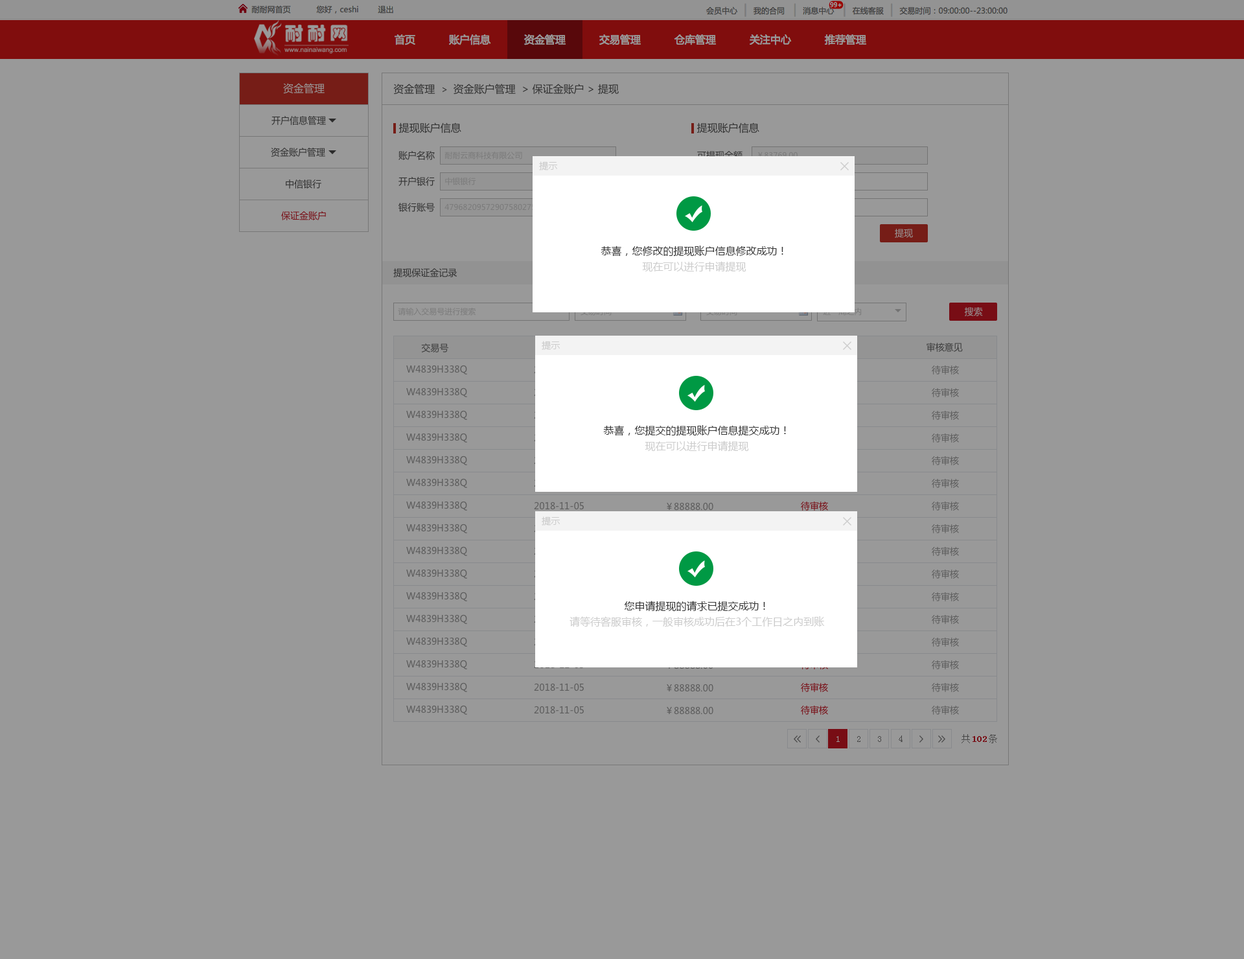
<style>
.page{position:relative;width:1244px;height:959px;background:#999999}
.page>*{position:absolute;margin:0}
.t1{font:10.4px "MicrosoftYaHei";color:#999999}
.t2{font:10.4px "MicrosoftYaHei";color:#323232}
.t3{font:9.1px "MicrosoftYaHei";color:#323232}
.t4{font:7.8px "MicrosoftYaHei";color:#7a7a7a}
.t5{font:9.1px "MicrosoftYaHei";color:#cccccc}
.t6{font:9.1px "MicrosoftYaHei";color:#780d15}
.t7{font:9.1px "MicrosoftYaHei";color:#999999}
.t8{font:10.4px/11.7px "MicrosoftYaHei";color:#333333}
.t9{font:10.4px/15.5px "MicrosoftYaHei";color:#cccccc}
.t10{font:9.1px "MicrosoftYaHei";color:#3d3d3d}
.t11{font:9.1px "MicrosoftYaHei";color:#5c5c5c}
.t12{font:9.1px "SimSun";color:#999999}
.t13{font:9.1px "SimSun";color:#474747}
.t14{font:9.1px "SimSun";color:#780d15;font-weight:bold}
</style>
<div class="page">
<p class="t1" style="left:283px;top:83px;width:42px;height:11px">资金管理</p>
<p class="t2" style="left:393px;top:84px;width:226px;height:11px">资金管理  <span class="t3">&gt;  </span>资金账户管理  &gt; 保证金账户 &gt; 提现</p>
<p class="t3" style="left:271px;top:116px;width:55px;height:9px">开户信息管理</p>
<p class="t2" style="left:398px;top:122px;width:63px;height:11px">提现账户信息</p>
<p class="t2" style="left:696px;top:122px;width:63px;height:11px">提现账户信息</p>
<p class="t3" style="left:271px;top:148px;width:54px;height:9px">资金账户管理</p>
<p class="t3" style="left:398px;top:151px;width:37px;height:9px">账户名称</p>
<p class="t4" style="left:444px;top:152px;width:78px;height:7px">耐耐云商科技有限公司</p>
<p class="t5" style="left:539px;top:161px;width:19px;height:9px">提示</p>
<p class="t3" style="left:286px;top:179px;width:35px;height:10px">中信银行</p>
<p class="t3" style="left:398px;top:177px;width:37px;height:9px">开户银行</p>
<p class="t4" style="left:445px;top:177px;width:31px;height:8px">中银银行</p>
<p class="t3" style="left:398px;top:203px;width:37px;height:9px">银行账号</p>
<p class="t6" style="left:281px;top:211px;width:45px;height:9px">保证金账户</p>
<p class="t7" style="left:895px;top:229px;width:18px;height:9px">提现</p>
<p class="t8" style="left:601px;top:246px;width:182px;height:26px;text-align:center">恭喜，您修改的提现账户信息修改成功！<br><span class="t9">现在可以进行申请提现</span></p>
<p class="t3" style="left:393px;top:268px;width:64px;height:9px">提现保证金记录</p>
<p class="t4" style="left:398px;top:308px;width:77px;height:7px">请输入交易号进行搜索</p>
<p class="t7" style="left:964px;top:307px;width:19px;height:9px">搜索</p>
<p class="t5" style="left:542px;top:341px;width:18px;height:9px">提示</p>
<p class="t10" style="left:421px;top:343px;width:28px;height:9px">交易号</p>
<p class="t10" style="left:926px;top:343px;width:37px;height:9px">审核意见</p>
<p class="t11" style="left:406px;top:365px;width:61px;height:9px">W4839H338Q</p>
<p class="t11" style="left:932px;top:365px;width:27px;height:9px">待审核</p>
<p class="t11" style="left:406px;top:387px;width:61px;height:10px">W4839H338Q</p>
<p class="t11" style="left:932px;top:388px;width:27px;height:9px">待审核</p>
<p class="t11" style="left:406px;top:410px;width:61px;height:10px">W4839H338Q</p>
<p class="t11" style="left:932px;top:411px;width:27px;height:9px">待审核</p>
<p class="t8" style="left:603px;top:425px;width:183px;height:27px;text-align:center">恭喜，您提交的提现账户信息提交成功！<br><span class="t9">现在可以进行申请提现</span></p>
<p class="t11" style="left:406px;top:433px;width:61px;height:9px">W4839H338Q</p>
<p class="t11" style="left:932px;top:433px;width:27px;height:9px">待审核</p>
<p class="t11" style="left:406px;top:455px;width:61px;height:10px">W4839H338Q</p>
<p class="t11" style="left:932px;top:456px;width:27px;height:9px">待审核</p>
<p class="t11" style="left:406px;top:478px;width:61px;height:10px">W4839H338Q</p>
<p class="t11" style="left:932px;top:479px;width:27px;height:9px">待审核</p>
<p class="t11" style="left:406px;top:501px;width:61px;height:9px">W4839H338Q</p>
<p class="t11" style="left:534px;top:501px;width:50px;height:9px">2018-11-05</p>
<p class="t11" style="left:667px;top:502px;width:46px;height:8px">￥88888.00</p>
<p class="t6" style="left:801px;top:501px;width:27px;height:9px">待审核</p>
<p class="t11" style="left:932px;top:501px;width:27px;height:9px">待审核</p>
<p class="t5" style="left:542px;top:516px;width:18px;height:9px">提示</p>
<p class="t11" style="left:406px;top:523px;width:61px;height:10px">W4839H338Q</p>
<p class="t11" style="left:932px;top:524px;width:27px;height:9px">待审核</p>
<p class="t11" style="left:406px;top:546px;width:61px;height:10px">W4839H338Q</p>
<p class="t11" style="left:932px;top:547px;width:27px;height:9px">待审核</p>
<p class="t11" style="left:406px;top:569px;width:61px;height:9px">W4839H338Q</p>
<p class="t11" style="left:932px;top:569px;width:27px;height:9px">待审核</p>
<p class="t11" style="left:406px;top:591px;width:61px;height:10px">W4839H338Q</p>
<p class="t11" style="left:932px;top:592px;width:27px;height:9px">待审核</p>
<p class="t9" style="left:569px;top:601px;width:256px;height:26px;text-align:center"><span class="t8">您申请提现的请求已提交成功！<br></span>请等待客服审核，一般审核成功后在3个工作日之内到账</p>
<p class="t11" style="left:406px;top:614px;width:61px;height:10px">W4839H338Q</p>
<p class="t11" style="left:932px;top:615px;width:27px;height:9px">待审核</p>
<p class="t11" style="left:406px;top:637px;width:61px;height:9px">W4839H338Q</p>
<p class="t11" style="left:932px;top:637px;width:27px;height:9px">待审核</p>
<p class="t11" style="left:406px;top:659px;width:61px;height:10px">W4839H338Q</p>
<p class="t11" style="left:932px;top:660px;width:27px;height:9px">待审核</p>
<p class="t11" style="left:406px;top:682px;width:61px;height:10px">W4839H338Q</p>
<p class="t11" style="left:534px;top:683px;width:50px;height:8px">2018-11-05</p>
<p class="t11" style="left:667px;top:683px;width:46px;height:9px">￥88888.00</p>
<p class="t6" style="left:801px;top:683px;width:27px;height:9px">待审核</p>
<p class="t11" style="left:932px;top:683px;width:27px;height:9px">待审核</p>
<p class="t11" style="left:406px;top:705px;width:61px;height:10px">W4839H338Q</p>
<p class="t11" style="left:534px;top:705px;width:50px;height:9px">2018-11-05</p>
<p class="t11" style="left:667px;top:706px;width:46px;height:9px">￥88888.00</p>
<p class="t6" style="left:801px;top:705px;width:27px;height:10px">待审核</p>
<p class="t11" style="left:932px;top:705px;width:27px;height:10px">待审核</p>
<p class="t12" style="left:836px;top:736px;width:4px;height:6px">1</p>
<p class="t13" style="left:857px;top:736px;width:3px;height:6px">2</p>
<p class="t13" style="left:878px;top:736px;width:3px;height:6px">3</p>
<p class="t13" style="left:898px;top:735px;width:4px;height:7px">4</p>
<p class="t13" style="left:961px;top:734px;width:36px;height:9px">共    条</p>
<p class="t14" style="left:972px;top:736px;width:15px;height:6px">102</p>
</div>
